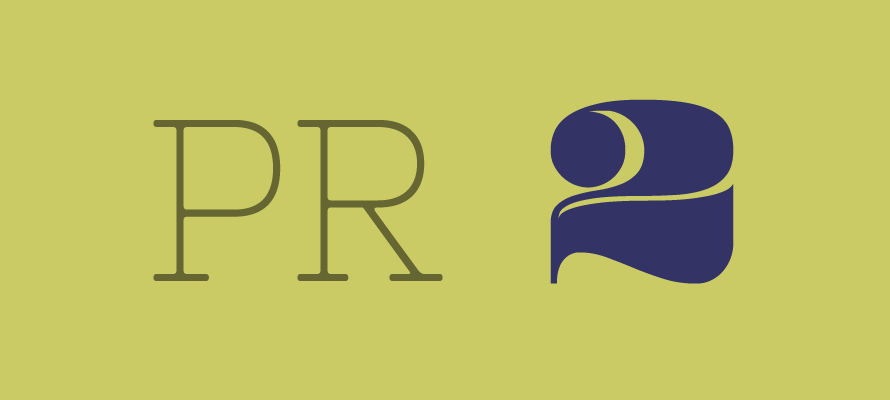
<style>
.page{position:relative;width:890px;height:400px;background:#cbcb66}
.page>*{position:absolute;margin:0}
.t1{font:230px "NixieOne-Regular";color:#666633}
.t2{font:300px "Pompadour-Black";color:#333366}
</style>
<div class="page">
<p class="t1" style="left:153px;top:99px;width:581px;height:185px">PR <span class="t2">2</span></p>
</div>
